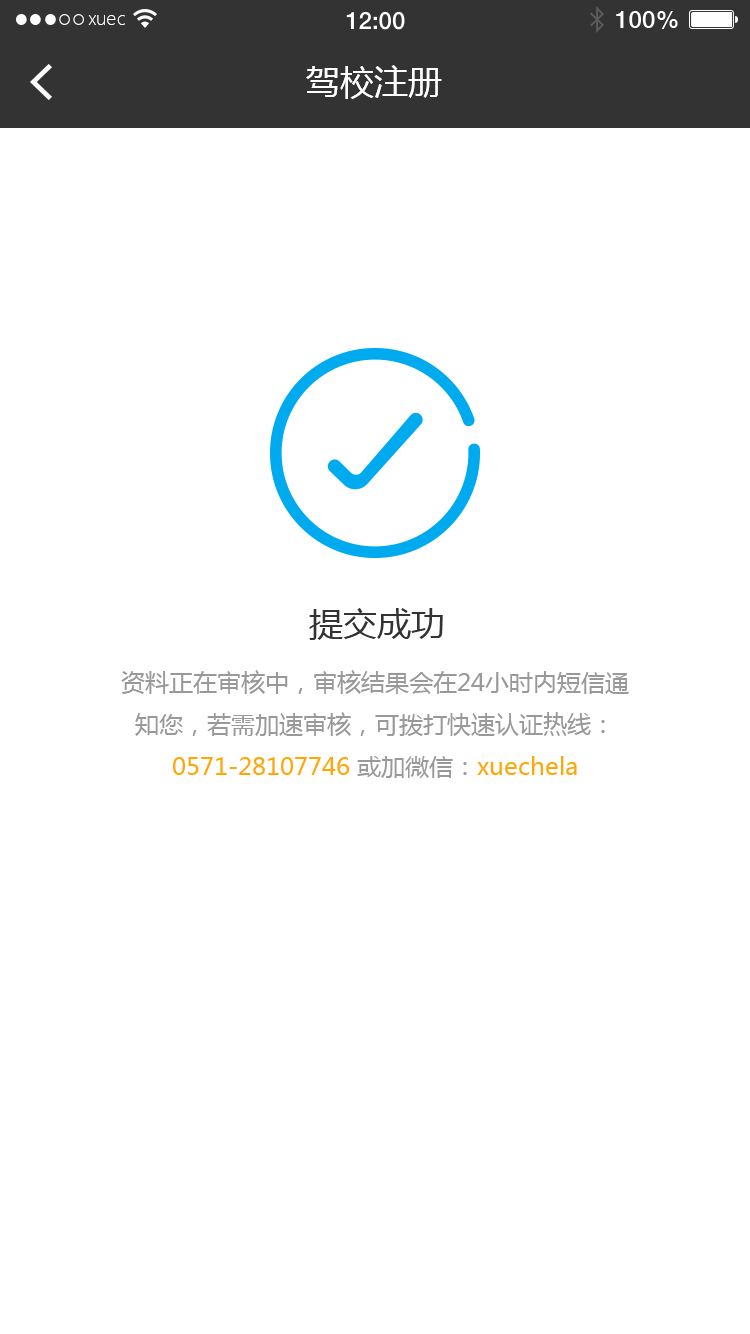
<style>
.page{position:relative;width:750px;height:1334px;background:#ffffff}
.page>*{position:absolute;margin:0}
.t1{font:18px "MicrosoftYaHeiLight";color:#ffffff}
.t2{font:34px "MicrosoftYaHei";color:#ffffff}
.t3{font:34px "MicrosoftYaHei";color:#333333}
.t4{font:24px "MicrosoftYaHei";color:#999999}
.t5{font:24px "MicrosoftYaHei";color:#ffa800}
</style>
<div class="page">
<p class="t1" style="left:88px;top:15px;width:37px;height:10px">xuec</p>
<p class="t2" style="left:306px;top:65px;width:136px;height:34px">驾校注册</p>
<p class="t3" style="left:309px;top:608px;width:134px;height:32px">提交成功</p>
<p class="t4" style="left:121px;top:670px;width:508px;height:108px;text-align:center">资料正在审核中，审核结果会在24小时内短信通知您，若需加速审核，可拨打快速认证热线：<span class="t5">0571-28107746</span> 或加微信：<span class="t5">xuechela</span></p>
</div>
